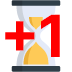
<style>
.page{position:relative;width:72px;height:72px;background:#ffffff}
.page>*{position:absolute;margin:0}
.t1{font:58.3px "Inter-Bold";letter-spacing:-0.025em;color:#ff0000}
</style>
<div class="page">
<p class="t1" style="left:5px;top:14px;width:55px;height:43px">+1</p>
</div>
